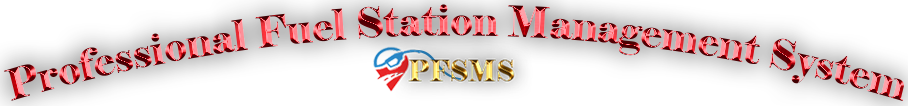
<style>
.page{position:relative;width:908px;height:106px;background:#ffffff}
.page>*{position:absolute;margin:0}
.t1{font:41.7px "Elephant-Regular";scale:0.91 1}
</style>
<div class="page">
<p class="t1" style="left:4px;top:4px;width:900px;height:97px">Professional Fuel Station Management System</p>
</div>
